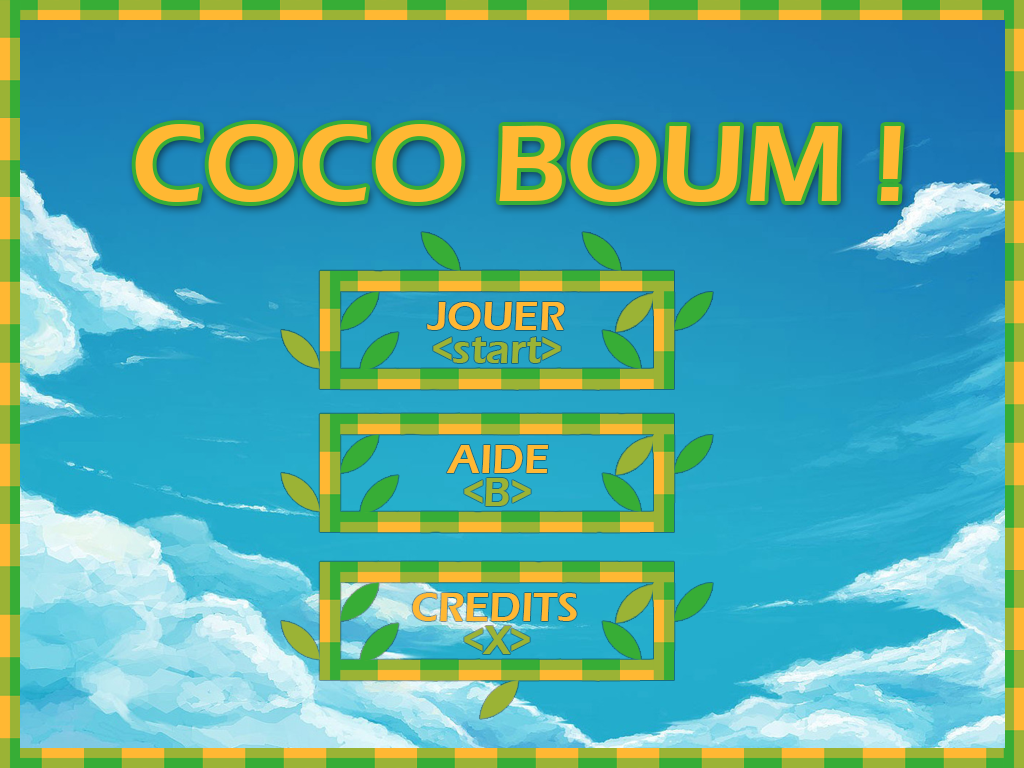
<style>
.page{position:relative;width:1024px;height:768px}
.page>*{position:absolute;margin:0}
.t1{font:112.5px "ErasITC-Demi";color:#ffb833}
.t2{font:41.7px "ErasITC-Demi";color:#ffb833}
.t3{font:41.7px "ErasITC-Demi";color:#9bb335}
</style>
<div class="page">
<p class="t1" style="left:135px;top:124px;width:766px;height:78px">COCO BOUM !</p>
<p class="t2" style="left:427px;top:302px;width:138px;height:28px">JOUER</p>
<p class="t3" style="left:433px;top:337px;width:128px;height:26px">&lt;start&gt;</p>
<p class="t2" style="left:446px;top:445px;width:103px;height:28px">AIDE</p>
<p class="t3" style="left:464px;top:478px;width:67px;height:28px">&lt;B&gt;</p>
<p class="t2" style="left:412px;top:593px;width:165px;height:28px">CREDITS</p>
<p class="t3" style="left:464px;top:626px;width:66px;height:28px">&lt;X&gt;</p>
</div>
